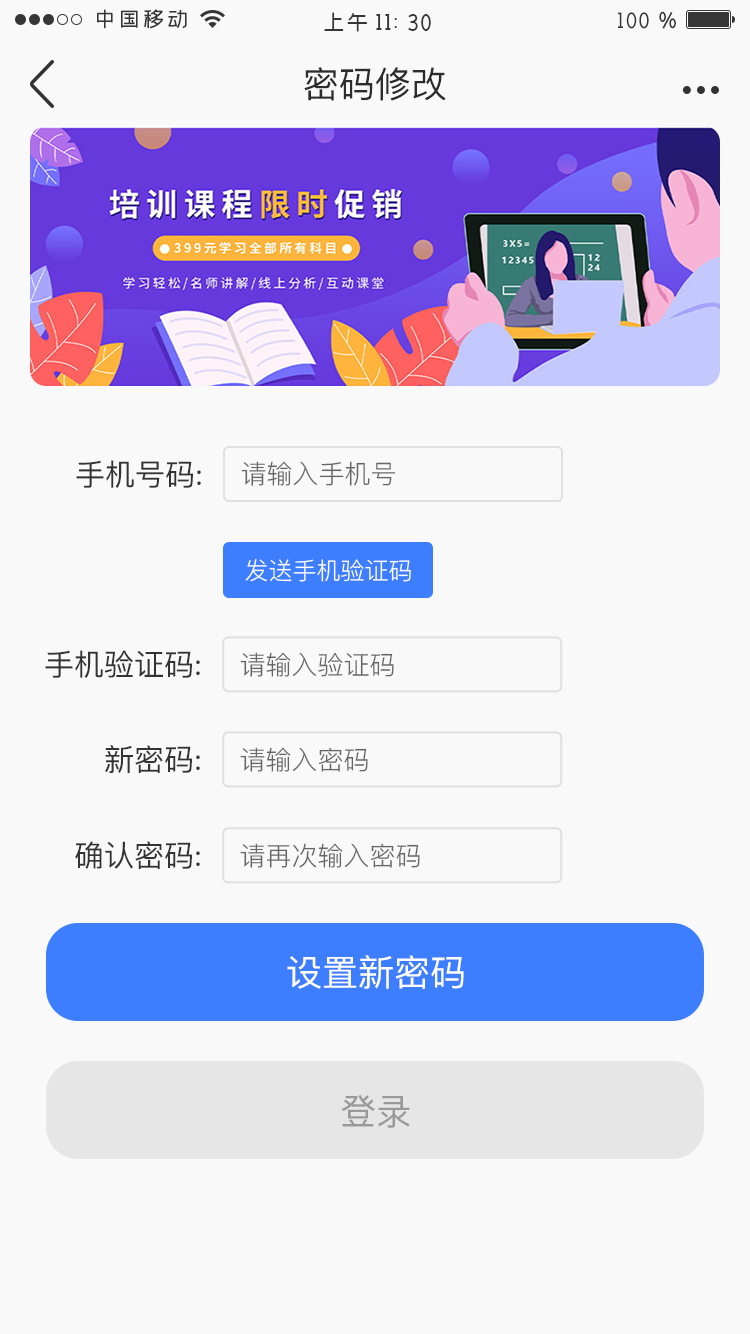
<style>
.page{position:relative;width:750px;height:1334px;background:#f9f9f9}
.page>*{position:absolute;margin:0}
.t1{font:36px "PingFang-SC-Medium";color:#2c2c2c;text-transform:uppercase}
.t2{font:30px "PingFang-SC-Medium";color:#333333}
.t3{font:26px "PingFang-SC-Regular";color:#666666}
.t4{font:24px "PingFang-SC-Regular";color:#ffffff}
.t5{font:36px "PingFang-SC-Medium";color:#ffffff}
.t6{font:36px "PingFang-SC-Medium";color:#999999}
</style>
<div class="page">
<p class="t1" style="left:304px;top:67px;width:142px;height:34px">密码修改</p>
<p class="t2" style="left:76px;top:460px;width:125px;height:28px">手机号码:</p>
<p class="t3" style="left:241px;top:461px;width:154px;height:25px">请输入手机号</p>
<p class="t4" style="left:245px;top:559px;width:166px;height:23px">发送手机验证码</p>
<p class="t2" style="left:45px;top:650px;width:155px;height:28px">手机验证码:</p>
<p class="t3" style="left:240px;top:652px;width:154px;height:25px">请输入验证码</p>
<p class="t2" style="left:105px;top:745px;width:95px;height:28px">新密码:</p>
<p class="t3" style="left:240px;top:747px;width:128px;height:25px">请输入密码</p>
<p class="t2" style="left:75px;top:841px;width:125px;height:28px">确认密码:</p>
<p class="t3" style="left:240px;top:843px;width:180px;height:25px">请再次输入密码</p>
<p class="t5" style="left:287px;top:955px;width:177px;height:34px">设置新密码</p>
<p class="t6" style="left:341px;top:1095px;width:69px;height:33px">登录</p>
</div>
